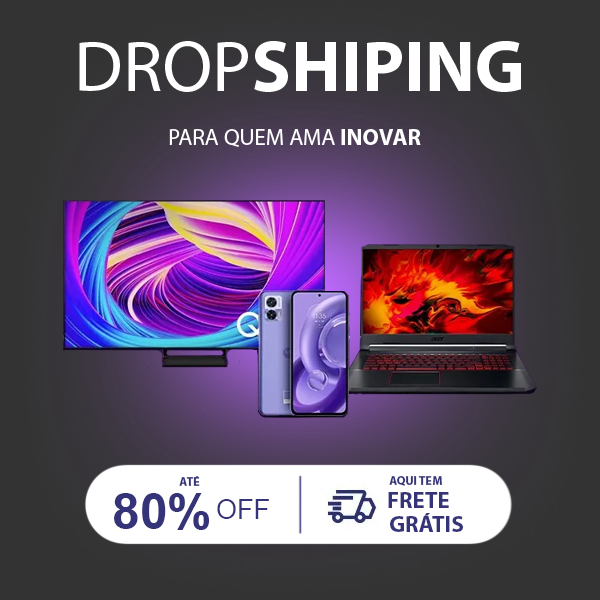
<style>
.page{position:relative;width:600px;height:600px}
.page>*{position:absolute;margin:0}
.t1{font:73px "MyriadPro-Bold";color:#ffffff}
.t2{font:73px "MyriadPro-Regular";color:#ffffff}
.t3{font:23px "MyriadPro-Regular";color:#ffffff}
.t4{font:23px "MyriadPro-Bold";color:#ffffff}
.t5{font:12px "MyriadPro-Bold";color:#363479}
.t6{font:50px "Arial-BoldMT";color:#363479}
.t7{font:23px "MyriadPro-Bold";color:#363479}
.t8{font:27px "ArialMT";color:#363479}
</style>
<div class="page">
<p class="t1" style="left:79px;top:41px;width:442px;height:51px"><span class="t2">DROP</span>SHIPING</p>
<p class="t3" style="left:169px;top:129px;width:252px;height:18px">PARA QUEM AMA<span class="t4"> INOVAR</span></p>
<p class="t5" style="left:179px;top:476px;width:21px;height:10px">ATÉ</p>
<p class="t5" style="left:389px;top:476px;width:53px;height:10px">AQUI TEM</p>
<p class="t6" style="left:114px;top:493px;width:95px;height:37px">80%</p>
<p class="t7" style="left:388px;top:492px;width:61px;height:16px">FRETE</p>
<p class="t8" style="left:217px;top:499px;width:52px;height:20px">OFF</p>
<p class="t7" style="left:390px;top:513px;width:73px;height:19px">GRÁTIS</p>
</div>
